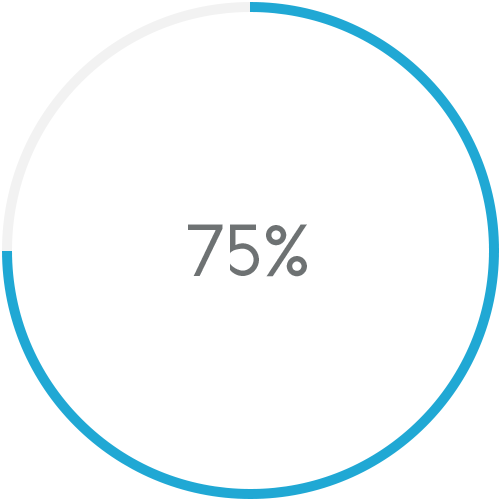
<style>
.page{position:relative;width:500px;height:500px;background:#ffffff}
.page>*{position:absolute;margin:0}
.t1{font:72px "Neou-Bold";color:#6e7273}
</style>
<div class="page">
<p class="t1" style="left:188px;top:224px;width:119px;height:53px">75%</p>
</div>
